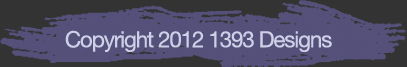
<style>
.page{position:relative;width:407px;height:67px;background:#333333}
.page>*{position:absolute;margin:0}
.t1{font:22.4px "HelveticaNeue";letter-spacing:-0.05em;color:#cfcfe8}
</style>
<div class="page">
<p class="t1" style="left:65px;top:30px;width:267px;height:22px">Copyright 2012 1393 Designs</p>
</div>
